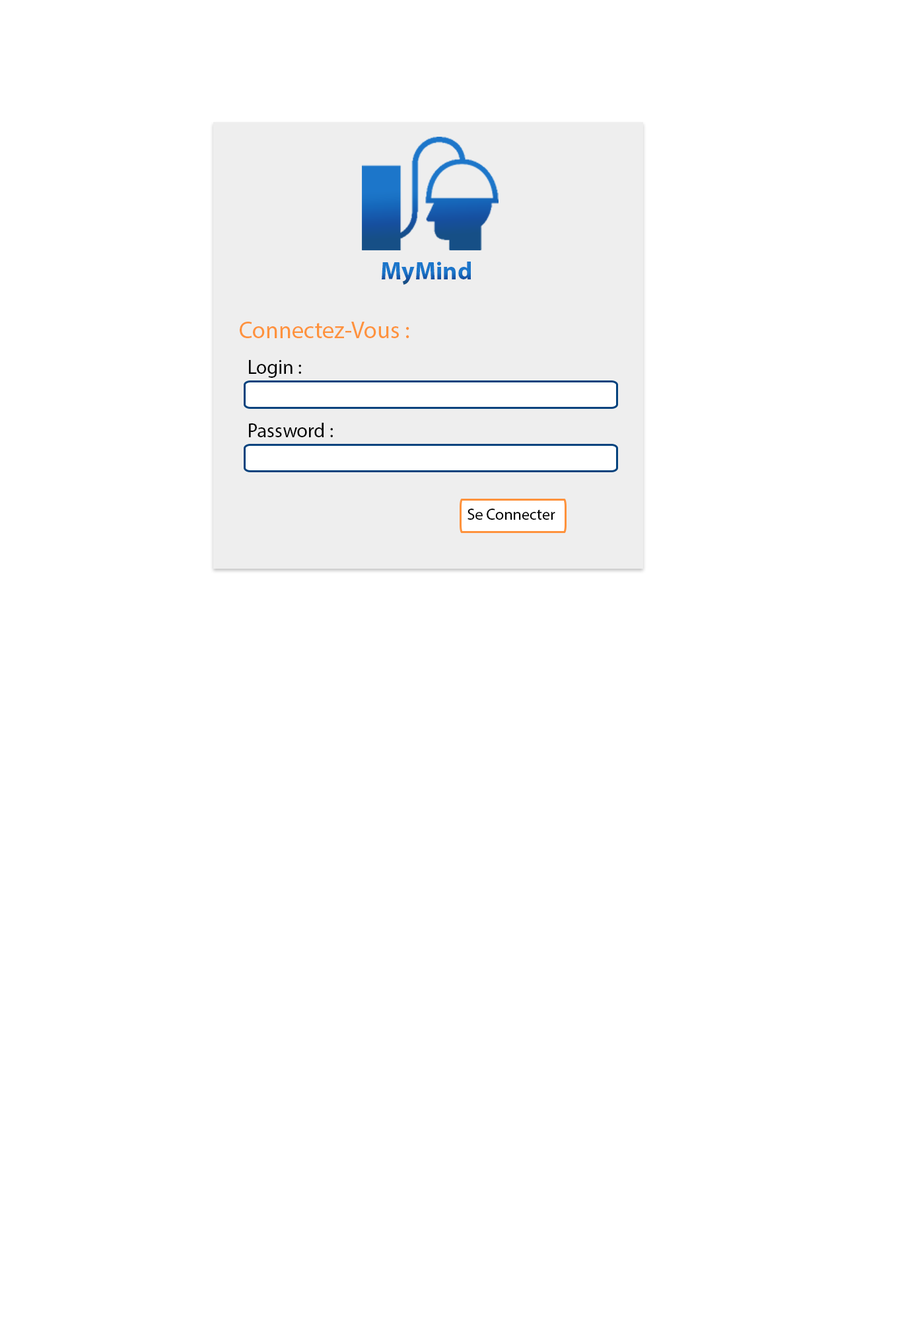
<style>
.page{position:relative;width:902px;height:1321px;background:#ffffff}
.page>*{position:absolute;margin:0}
.t1{font:25px "MyriadPro-Bold";color:#1c76ca}
.t2{font:23.8px "MyriadPro-Regular";color:#fe923c}
.t3{font:19.8px "MyriadPro-Regular";color:#000000}
.t4{font:15.9px "MyriadPro-Regular";color:#000000}
</style>
<div class="page">
<p class="t1" style="left:382px;top:262px;width:90px;height:23px">MyMind</p>
<p class="t2" style="left:240px;top:322px;width:170px;height:16px">Connectez-Vous :</p>
<p class="t3" style="left:249px;top:360px;width:52px;height:18px">Login :</p>
<p class="t3" style="left:249px;top:423px;width:84px;height:14px">Password :</p>
<p class="t4" style="left:468px;top:509px;width:88px;height:11px">Se Connecter</p>
</div>
